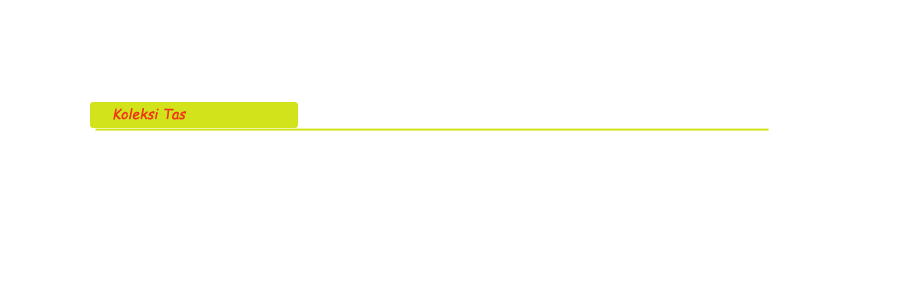
<style>
.page{position:relative;width:900px;height:300px;background:#ffffff}
.page>*{position:absolute;margin:0}
.t1{font:14px "ComicSansMS";color:#f03617;font-style:italic}
</style>
<div class="page">
<p class="t1" style="left:113px;top:108px;width:73px;height:12px">Koleksi Tas</p>
</div>
